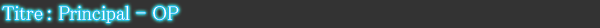
<style>
.page{position:relative;width:600px;height:28px;background:#333333}
.page>*{position:absolute;margin:0}
.t1{font:20px "MS-PMincho";color:#ffffff}
</style>
<div class="page">
<p class="t1" style="left:2px;top:5px;width:177px;height:18px">Titre : Principal - OP</p>
</div>
